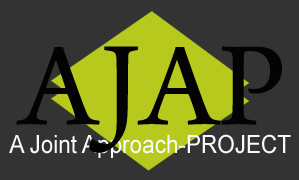
<style>
.page{position:relative;width:299px;height:180px;background:#333333}
.page>*{position:absolute;margin:0}
.t1{font:125px "ArnoPro-Regular";color:#030303}
.t2{font:25px "ArialMT";color:#f8fafc;scale:0.9 1}
</style>
<div class="page">
<p class="t1" style="left:16px;top:46px;width:266px;height:107px">AJAP</p>
<p class="t2" style="left:9px;top:134px;width:282px;height:24px">A Joint Approach-PROJECT</p>
</div>
